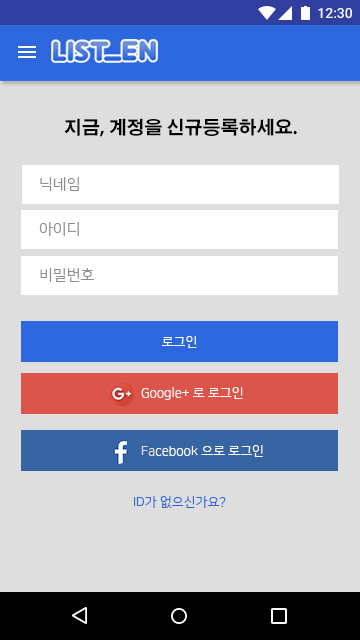
<style>
.page{position:relative;width:360px;height:640px;background:#dedede}
.page>*{position:absolute;margin:0}
.t1{font:18px "AdobeGothicStd-Bold";color:#000000}
.t2{font:15.2px "NanumSquareR";color:#8d8d8d}
.t3{font:13px "NanumSquareR";color:#ffffff}
.t4{font:13px "NanumSquareR";color:#dedede}
.t5{font:13px "NanumSquareR";color:#2d67dd}
</style>
<div class="page">
<p class="t1" style="left:64px;top:118px;width:233px;height:19px">지금, 계정을 신규등록하세요.</p>
<p class="t2" style="left:40px;top:177px;width:39px;height:14px">닉네임</p>
<p class="t2" style="left:39px;top:222px;width:40px;height:14px">아이디</p>
<p class="t2" style="left:40px;top:268px;width:54px;height:14px">비밀번호</p>
<p class="t3" style="left:162px;top:336px;width:35px;height:12px">로그인</p>
<p class="t3" style="left:141px;top:387px;width:102px;height:13px">Google+ 로 로그인</p>
<p class="t3" style="left:141px;top:445px;width:122px;height:12px"><span class="t4">Fa</span>cebook 으로 로그인</p>
<p class="t5" style="left:134px;top:496px;width:92px;height:12px">ID가 없으신가요?</p>
</div>
